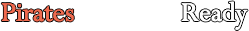
<style>
.page{position:relative;width:249px;height:31px;background:#ffffff}
.page>*{position:absolute;margin:0}
.t1{font:30px "Perpetua";color:#f06a4f}
.t2{font:30px "Perpetua";color:#fefefe}
</style>
<div class="page">
<p class="t1" style="left:1px;top:1px;width:247px;height:29px">Pirates   <span class="t2">Ready</span></p>
</div>
